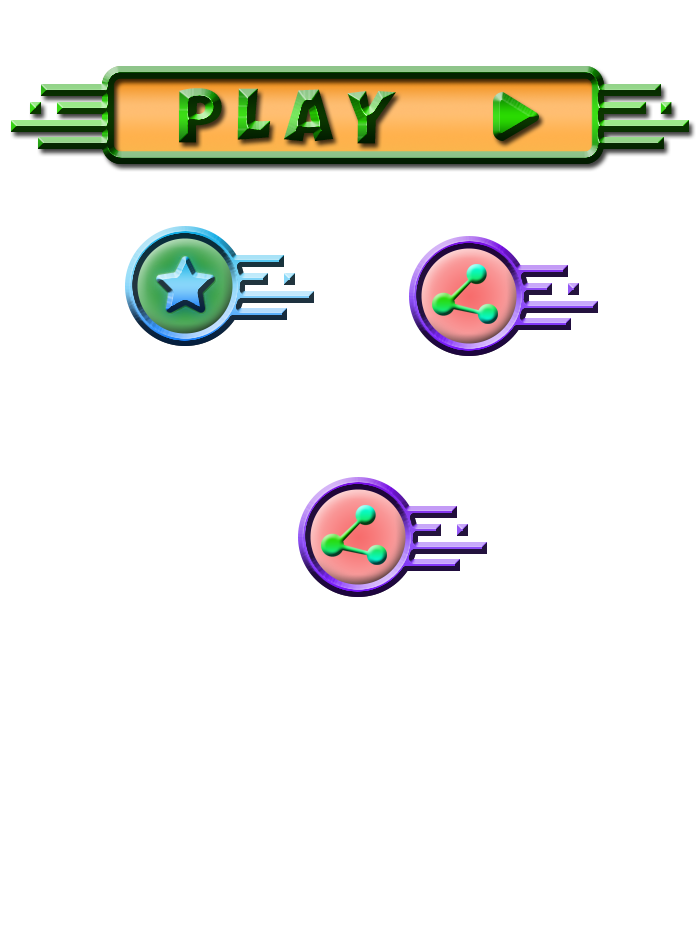
<style>
.page{position:relative;width:700px;height:945px;background:#ffffff}
.page>*{position:absolute;margin:0}
.t1{font:18.1px "LuckiestGuy-Regular"}
</style>
<div class="page">
<p class="t1" style="left:179px;top:88px;width:217px;height:56px">P L A Y</p>
</div>
